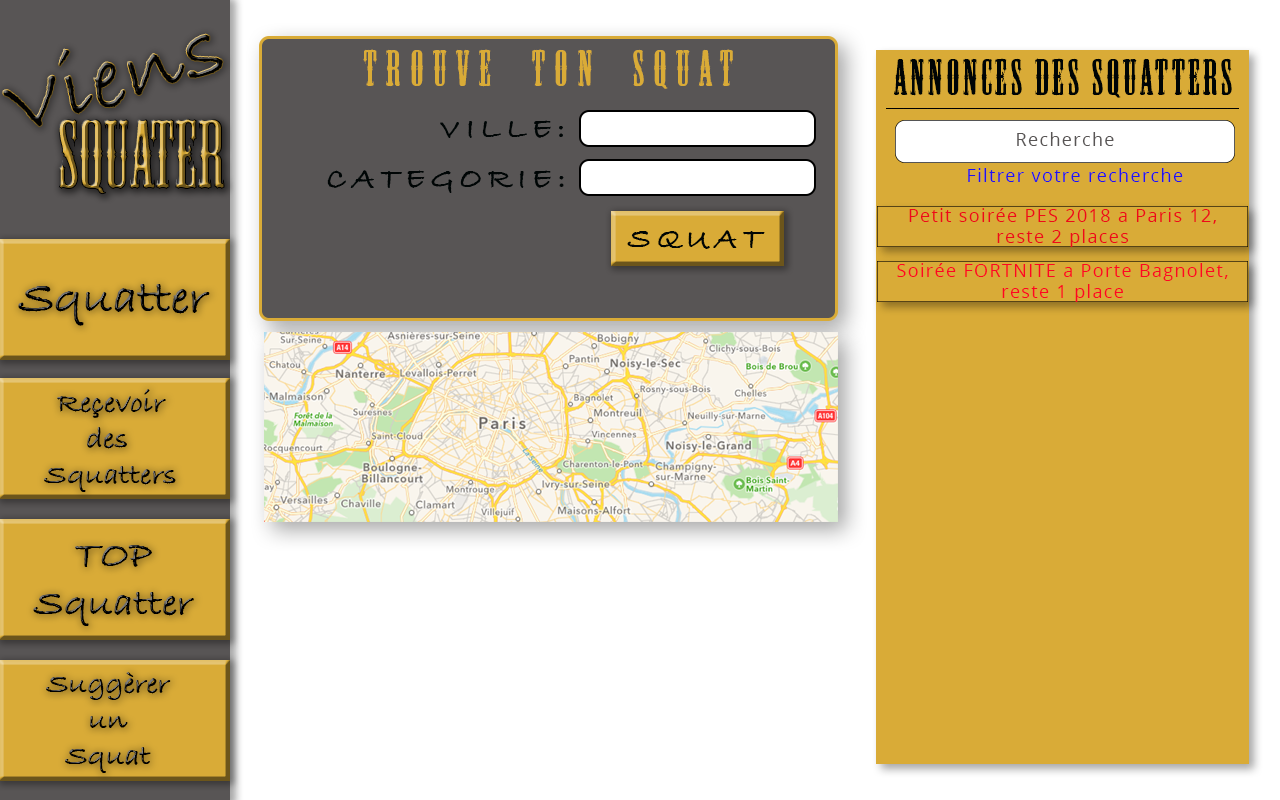
<style>
.page{position:relative;width:1280px;height:800px;background:#d9ab37}
.page>*{position:absolute;margin:0}
.t1{font:91px "BradleyHandITCTT-Bold"}
.t2{font:48px "MesquiteStd";letter-spacing:0.2em;color:#d9ab37}
.t3{font:30px "MesquiteStd";letter-spacing:0.2em;color:#d9ab37}
.t4{font:48px "MesquiteStd";letter-spacing:0.075em;color:#000505}
.t5{font:91px "MesquiteStd"}
.t6{font:30.7px "BradleyHandITCTT-Bold";letter-spacing:0.2em;color:#000505}
.t7{font:18px "OpenSans";letter-spacing:0.075em;color:#585555}
.t8{font:18px "OpenSans";letter-spacing:0.075em;color:#2112ed}
.t9{font:18px "OpenSans";letter-spacing:0.075em;color:#ed0a1a}
.t10{font:18px "OpenSans";letter-spacing:0.075em;color:#fd0623}
.t11{font:48px "BradleyHandITCTT-Bold";color:#010101}
.t12{font:30px "BradleyHandITCTT-Bold"}
.t13{font:40px "BradleyHandITCTT-Bold";color:#010101}
.t14{font:30px "BradleyHandITCTT-Bold";color:#010101}
</style>
<div class="page">
<p class="t1" style="left:2px;top:33px;width:222px;height:95px;rotate:-17deg">Viens</p>
<p class="t2" style="left:363px;top:49px;width:370px;height:40px"><span class="t3"><br></span>Trouve  ton  Squat</p>
<p class="t4" style="left:893px;top:58px;width:339px;height:40px">Annonces des squatters</p>
<p class="t5" style="left:58px;top:118px;width:167px;height:77px">Squater</p>
<p class="t6" style="left:440px;top:120px;width:123px;height:18px">VILLE:</p>
<p class="t7" style="left:1017px;top:132px;width:97px;height:14px">Recherche</p>
<p class="t6" style="left:327px;top:170px;width:237px;height:23px">CATEGORIE:</p>
<p class="t8" style="left:968px;top:168px;width:215px;height:14px">Filtrer votre recherche</p>
<p class="t9" style="left:909px;top:208px;width:307px;height:39px;text-align:center">Petit soirée PES 2018 a Paris 12,<br>reste 2 places</p>
<p class="t6" style="left:627px;top:230px;width:138px;height:19px">SQUAT</p>
<p class="t10" style="left:897px;top:263px;width:331px;height:39px;text-align:center">Soirée FORTNITE a Porte Bagnolet,<br>reste 1 place</p>
<p class="t11" style="left:18px;top:284px;width:192px;height:42px">Squatter</p>
<p class="t12" style="left:44px;top:389px;width:132px;height:103px;text-align:center">Reçevoir<br>des <br>Squatters</p>
<p class="t13" style="left:33px;top:545px;width:161px;height:81px;text-align:center">TOP<br>Squatter</p>
<p class="t14" style="left:46px;top:672px;width:125px;height:101px;text-align:center">Suggèrer<br>un<br>Squat</p>
</div>
